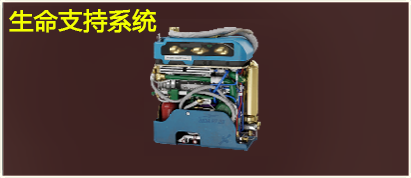
<style>
.page{position:relative;width:411px;height:178px}
.page>*{position:absolute;margin:0}
.t1{font:24px "MicrosoftYaHeiUI";color:#f4ff00;font-weight:bold}
</style>
<div class="page">
<p class="t1" style="left:9px;top:9px;width:148px;height:24px">生命支持系统</p>
</div>
